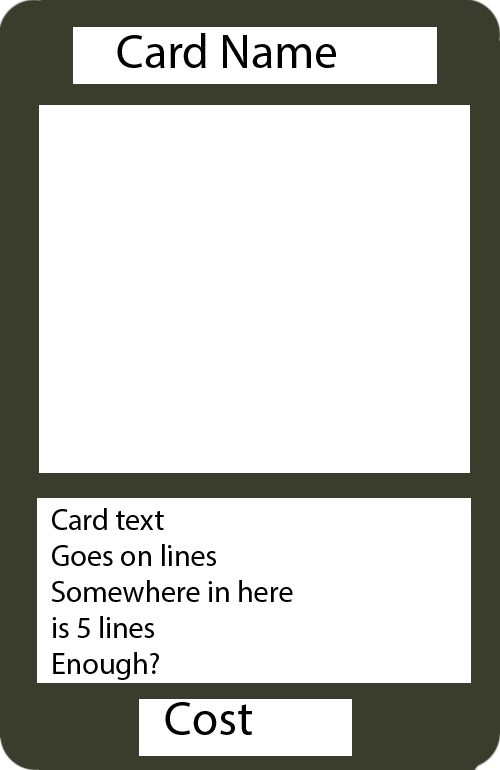
<style>
.page{position:relative;width:500px;height:770px;background:#ffffff}
.page>*{position:absolute;margin:0}
.t1{font:48px "MyriadPro-Regular";color:#000000}
.t2{font:30px "MyriadPro-Regular";color:#000000}
</style>
<div class="page">
<p class="t1" style="left:117px;top:33px;width:219px;height:35px">Card Name</p>
<p class="t2" style="left:51px;top:508px;width:242px;height:172px">Card text<br>Goes on lines<br>Somewhere in here<br>is 5 lines<br>Enough?</p>
<p class="t1" style="left:165px;top:702px;width:87px;height:33px">Cost</p>
</div>
